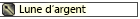
<style>
.page{position:relative;width:140px;height:19px;background:#ffffff}
.page>*{position:absolute;margin:0}
.t1{font:10.9px "LaoUI";color:#000000}
</style>
<div class="page">
<p class="t1" style="left:19px;top:5px;width:67px;height:10px">Lune d’argent</p>
</div>
